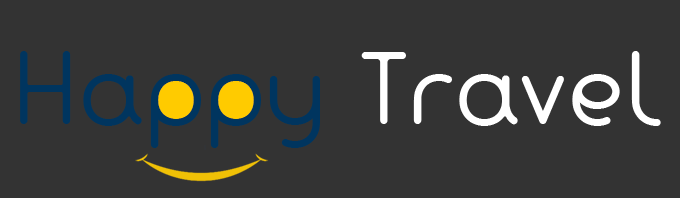
<style>
.page{position:relative;width:680px;height:198px;background:#333333}
.page>*{position:absolute;margin:0}
.t1{font:90px "Fabada";color:#ffffff}
.t2{font:90px "Fabada";color:#00355f}
</style>
<div class="page">
<p class="t1" style="left:20px;top:51px;width:641px;height:97px"><span class="t2">Happy </span>Travel</p>
</div>
